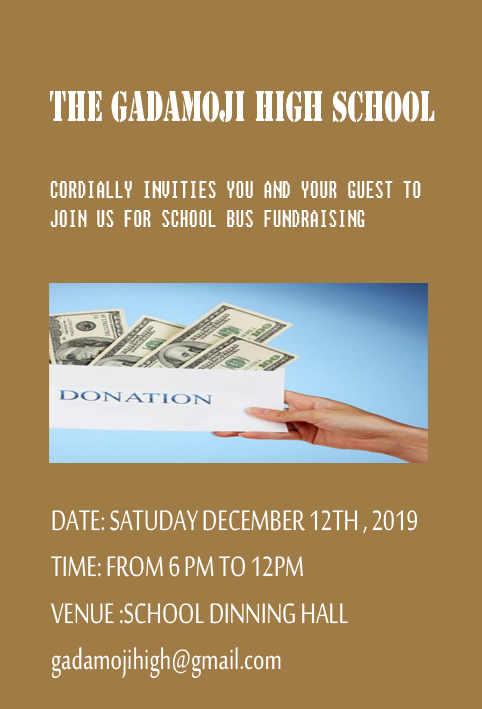
<style>
.page{position:relative;width:482px;height:709px;background:#9f7b46}
.page>*{position:absolute;margin:0}
.t1{font:24px "Fixedsys";color:#ffffff;scale:0.62 1}
.t2{font:39.7px "StencilStd";color:#ffffff;scale:0.62 1}
.t3{font:38.8px "SakkalMajalla";color:#ffffff;scale:0.74 1}
</style>
<div class="page">
<p class="t1" style="left:50px;top:91px;width:385px;height:136px"><span class="t2">THE GADAMOJI HiGH SCHOOL<br><br></span>CORDIALLY INVITIES YOU AND YOUR GUEST TO<br>JOIN US FOR SCHOOL BUS FUNDRAISING</p>
<p class="t3" style="left:51px;top:510px;width:367px;height:169px">DATE: SATUDAY DECEMBER 12TH , 2019 <br>TIME: FROM 6 PM TO 12PM<br>VENUE :SCHOOL DINNING HALL<br>gadamojihigh@gmail.com</p>
</div>
